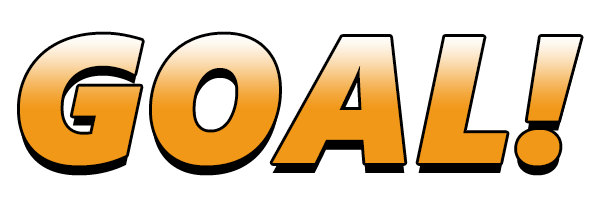
<style>
.page{position:relative;width:600px;height:200px;background:#ffffff}
.page>*{position:absolute;margin:0}
.t1{font:180px "SegoeUIBlack-Italic"}
</style>
<div class="page">
<p class="t1" style="left:20px;top:34px;width:561px;height:132px">GOAL!</p>
</div>
